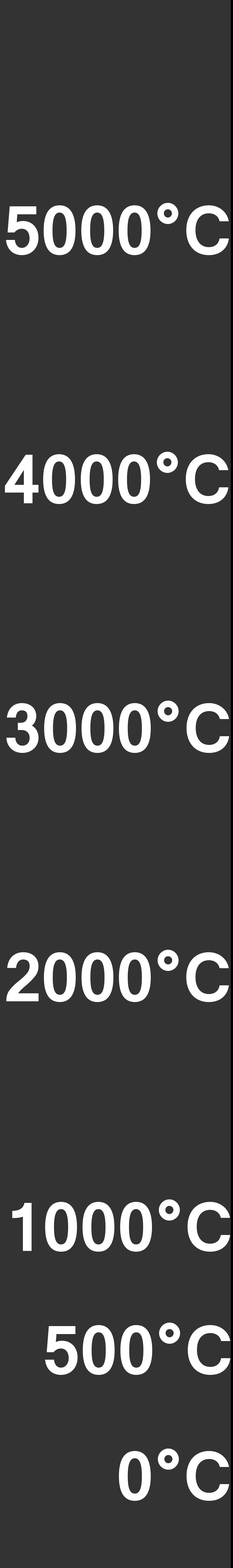
<style>
.page{position:relative;width:233px;height:1568px;background:#333333}
.page>*{position:absolute;margin:0}
.t1{font:74.7px "Latha-Bold";color:#ffffff}
</style>
<div class="page">
<p class="t1" style="left:6px;top:203px;width:223px;height:52px">5000°C</p>
<p class="t1" style="left:5px;top:452px;width:223px;height:52px">4000°C</p>
<p class="t1" style="left:6px;top:701px;width:223px;height:52px">3000°C</p>
<p class="t1" style="left:6px;top:950px;width:223px;height:52px">2000°C</p>
<p class="t1" style="left:12px;top:1199px;width:218px;height:53px">1000°C</p>
<p class="t1" style="left:45px;top:1323px;width:185px;height:52px">500°C</p>
<p class="t1" style="left:119px;top:1449px;width:110px;height:52px">0°C</p>
</div>
